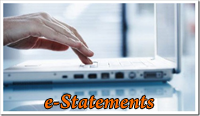
<style>
.page{position:relative;width:200px;height:116px}
.page>*{position:absolute;margin:0}
.t1{font:21.3px "ArnoPro-SmbdItalicCaption";color:#fe6c01}
</style>
<div class="page">
<p class="t1" style="left:45px;top:94px;width:109px;height:15px">e-Statements</p>
</div>
